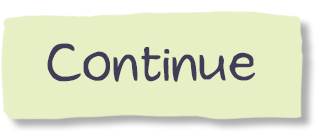
<style>
.page{position:relative;width:317px;height:132px;background:#e7efc5}
.page>*{position:absolute;margin:0}
.t1{font:48px "TidyHand";color:#413c58;font-weight:bold}
</style>
<div class="page">
<p class="t1" style="left:47px;top:43px;width:208px;height:39px">Continue</p>
</div>
